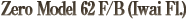
<style>
.page{position:relative;width:186px;height:19px;background:#ffffff}
.page>*{position:absolute;margin:0}
.t1{font:18px "RyuminPro-ExBold";letter-spacing:-0.085em;color:#4a3f32;font-weight:bold;scale:0.85 1}
</style>
<div class="page">
<p class="t1" style="left:1px;top:1px;width:186px;height:18px">Zero Model 62 F/B (Iwai Fl.)</p>
</div>
